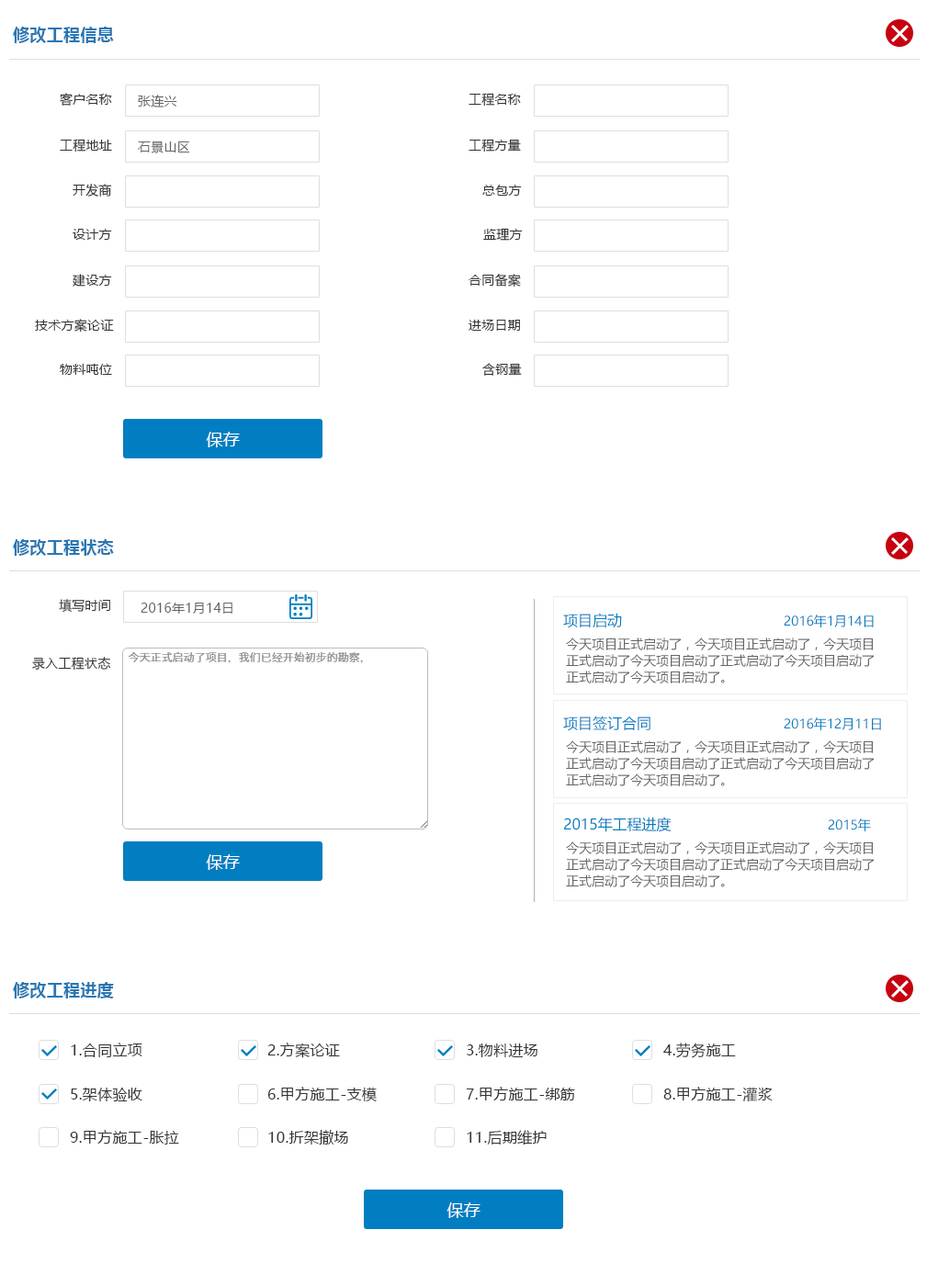
<style>
.page{position:relative;width:927px;height:1286px;background:#ffffff}
.page>*{position:absolute;margin:0}
.t1{font:16.5px "MicrosoftYaHei-Bold";letter-spacing:0.02em;color:#2977b3}
.t2{font:12.9px "MicrosoftYaHei";letter-spacing:0.02em;color:#333333}
.t3{font:12.9px "MicrosoftYaHei";letter-spacing:0.02em;color:#666666}
.t4{font:16.5px "MicrosoftYaHei";letter-spacing:0.02em;color:#ffffff}
.t5{font:14.7px "MicrosoftYaHei";color:#017ec1}
.t6{font:12.9px "MicrosoftYaHei";color:#017ec1}
.t7{font:12.9px/16.5px "MicrosoftYaHei";color:#666666}
.t8{font:14.7px "MicrosoftYaHei";letter-spacing:0.02em;color:#333333}
</style>
<div class="page">
<p class="t1" style="left:13px;top:27px;width:101px;height:16px">修改工程信息</p>
<p class="t2" style="left:60px;top:93px;width:52px;height:13px">客户名称</p>
<p class="t3" style="left:138px;top:95px;width:39px;height:12px">张连兴</p>
<p class="t2" style="left:469px;top:93px;width:52px;height:14px">工程名称</p>
<p class="t2" style="left:60px;top:139px;width:52px;height:14px">工程地址</p>
<p class="t3" style="left:138px;top:141px;width:52px;height:12px">石景山区</p>
<p class="t2" style="left:469px;top:139px;width:52px;height:14px">工程方量</p>
<p class="t2" style="left:73px;top:184px;width:39px;height:13px">开发商</p>
<p class="t2" style="left:482px;top:185px;width:40px;height:11px">总包方</p>
<p class="t2" style="left:73px;top:229px;width:39px;height:11px">设计方</p>
<p class="t2" style="left:483px;top:228px;width:40px;height:13px">监理方</p>
<p class="t2" style="left:73px;top:274px;width:39px;height:13px">建设方</p>
<p class="t2" style="left:469px;top:274px;width:52px;height:14px">合同备案</p>
<p class="t2" style="left:35px;top:319px;width:79px;height:14px">技术方案论证</p>
<p class="t2" style="left:469px;top:320px;width:51px;height:11px">进场日期</p>
<p class="t2" style="left:60px;top:364px;width:52px;height:11px">物料吨位</p>
<p class="t2" style="left:482px;top:363px;width:40px;height:13px">含钢量</p>
<p class="t4" style="left:206px;top:432px;width:34px;height:15px">保存</p>
<p class="t1" style="left:13px;top:539px;width:101px;height:17px">修改工程状态</p>
<p class="t2" style="left:59px;top:599px;width:51px;height:14px">填写时间</p>
<p class="t3" style="left:141px;top:603px;width:91px;height:11px">2016年1月14日</p>
<p class="t5" style="left:563px;top:613px;width:59px;height:15px">项目启动</p>
<p class="t6" style="left:784px;top:615px;width:90px;height:13px">2016年1月14日</p>
<p class="t7" style="left:566px;top:638px;width:308px;height:46px">今天项目正式启动了，今天项目正式启动了，今天项目<br>正式启动了今天项目启动了正式启动了今天项目启动了<br>正式启动了今天项目启动了。</p>
<p class="t2" style="left:32px;top:657px;width:79px;height:14px">录入工程状态</p>
<p class="t5" style="left:563px;top:716px;width:87px;height:15px">项目签订合同</p>
<p class="t6" style="left:784px;top:718px;width:97px;height:12px">2016年12月11日</p>
<p class="t7" style="left:566px;top:741px;width:308px;height:45px">今天项目正式启动了，今天项目正式启动了，今天项目<br>正式启动了今天项目启动了正式启动了今天项目启动了<br>正式启动了今天项目启动了。</p>
<p class="t5" style="left:564px;top:817px;width:108px;height:15px">2015年工程进度</p>
<p class="t6" style="left:828px;top:819px;width:43px;height:12px">2015年</p>
<p class="t7" style="left:566px;top:842px;width:308px;height:46px">今天项目正式启动了，今天项目正式启动了，今天项目<br>正式启动了今天项目启动了正式启动了今天项目启动了<br>正式启动了今天项目启动了。</p>
<p class="t4" style="left:206px;top:854px;width:34px;height:16px">保存</p>
<p class="t1" style="left:13px;top:982px;width:101px;height:17px">修改工程进度</p>
<p class="t8" style="left:71px;top:1043px;width:71px;height:15px">1.合同立项</p>
<p class="t8" style="left:267px;top:1043px;width:73px;height:15px">2.方案论证</p>
<p class="t8" style="left:467px;top:1044px;width:70px;height:14px">3.物料进场</p>
<p class="t8" style="left:663px;top:1043px;width:73px;height:15px">4.劳务施工</p>
<p class="t8" style="left:71px;top:1088px;width:71px;height:14px">5.架体验收</p>
<p class="t8" style="left:267px;top:1087px;width:110px;height:15px">6.甲方施工-支模</p>
<p class="t8" style="left:466px;top:1087px;width:109px;height:14px">7.甲方施工-绑筋</p>
<p class="t8" style="left:663px;top:1087px;width:110px;height:15px">8.甲方施工-灌浆</p>
<p class="t8" style="left:70px;top:1130px;width:109px;height:15px">9.甲方施工-胀拉</p>
<p class="t8" style="left:268px;top:1130px;width:80px;height:15px">10.折架撤场</p>
<p class="t8" style="left:467px;top:1130px;width:80px;height:16px">11.后期维护</p>
<p class="t4" style="left:447px;top:1203px;width:34px;height:15px">保存</p>
</div>
